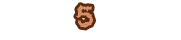
<style>
.page{position:relative;width:181px;height:40px;background:#ffffff}
.page>*{position:absolute;margin:0}
.t1{font:28px "TOBACCO";color:#c4845a;font-weight:bold}
</style>
<div class="page">
<p class="t1" style="left:76px;top:5px;width:17px;height:23px">5</p>
</div>
